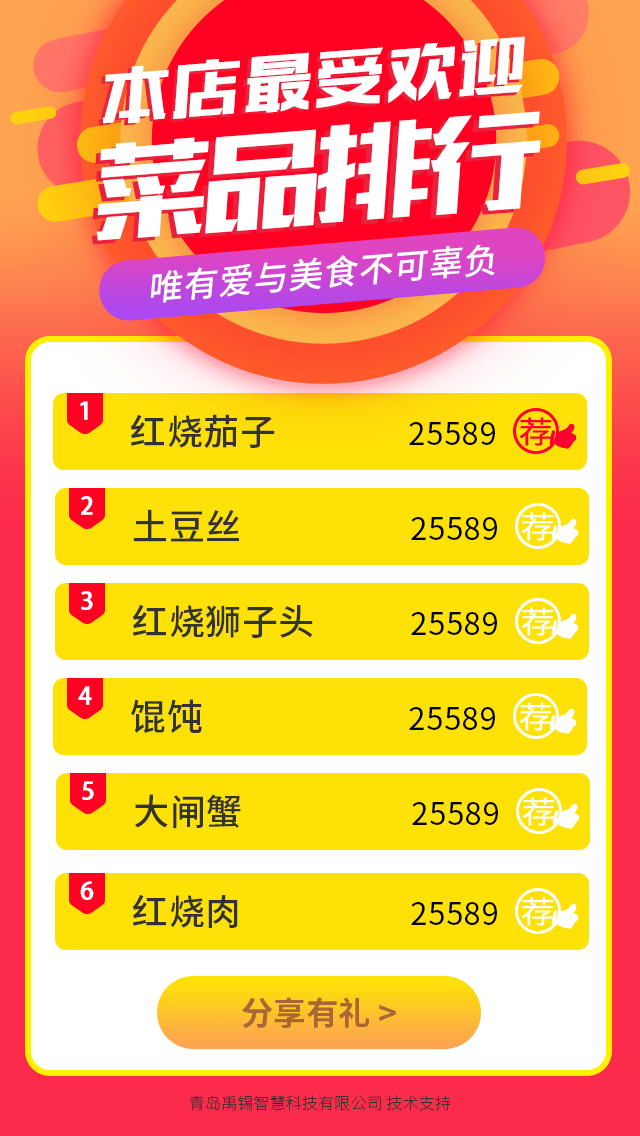
<style>
.page{position:relative;width:640px;height:1136px;background:#fee207}
.page>*{position:absolute;margin:0}
.t1{font:75.8px "MFBanHei_Noncommercial-Regular";letter-spacing:0.12em;font-style:italic;scale:0.85 1}
.t2{font:75.8px "MFBanHei_Noncommercial-Regular";letter-spacing:0.12em;color:#ffffff;font-style:italic;scale:0.85 1}
.t3{font:130.1px "MFBanHei_Noncommercial-Regular";letter-spacing:0.01em;color:#ffffff;font-style:italic;scale:0.85 1}
.t4{font:130.1px "MFBanHei_Noncommercial-Regular";letter-spacing:0.01em;font-style:italic;scale:0.85 1}
.t5{font:34.5px "SourceHanSansCN-Medium";letter-spacing:0.02em;color:#ffffff;font-style:italic}
.t6{font:23.8px "AdobeHeitiStd-Regular";color:#ffffff;font-weight:bold}
.t7{font:36px "SourceHanSansCN-Medium";letter-spacing:0.01em;color:#333333}
.t8{font:31px "SourceHanSansCN-Regular";letter-spacing:0.02em;color:#000000}
.t9{font:30.4px "SourceHanSansCN-Regular";letter-spacing:0.1em;color:#ff0033;scale:1.13 1}
.t10{font:30.4px "SourceHanSansCN-Regular";letter-spacing:0.1em;color:#ffffff;scale:1.13 1}
.t11{font:32.4px "SourceHanSansCN-Bold";color:#aa6736;text-transform:uppercase}
.t12{font:16px "SourceHanSansCN-ExtraLight";letter-spacing:0.01em;color:#333333}
</style>
<div class="page">
<p class="t1" style="left:98px;top:39px;width:424px;height:87px;rotate:-4deg">本店最受欢迎</p>
<p class="t2" style="left:102px;top:36px;width:423px;height:88px;rotate:-4deg">本店最受欢迎</p>
<p class="t3" style="left:96px;top:111px;width:445px;height:130px;rotate:-4deg">菜品排行</p>
<p class="t4" style="left:91px;top:115px;width:444px;height:130px;rotate:-4deg">菜品排行</p>
<p class="t5" style="left:150px;top:244px;width:345px;height:59px;rotate:-5deg">唯有爱与美食不可辜负</p>
<p class="t6" style="left:80px;top:401px;width:8px;height:19px">1</p>
<p class="t7" style="left:130px;top:414px;width:145px;height:34px">红烧茄子</p>
<p class="t8" style="left:409px;top:422px;width:86px;height:23px">25589</p>
<p class="t9" style="left:519px;top:417px;width:33px;height:29px">荐</p>
<p class="t6" style="left:81px;top:496px;width:12px;height:19px">2</p>
<p class="t7" style="left:133px;top:509px;width:106px;height:33px">土豆丝</p>
<p class="t8" style="left:411px;top:517px;width:86px;height:23px">25589</p>
<p class="t10" style="left:521px;top:512px;width:33px;height:29px">荐</p>
<p class="t6" style="left:81px;top:591px;width:12px;height:19px">3</p>
<p class="t7" style="left:132px;top:604px;width:181px;height:34px">红烧狮子头</p>
<p class="t8" style="left:411px;top:612px;width:86px;height:23px">25589</p>
<p class="t10" style="left:521px;top:607px;width:33px;height:29px">荐</p>
<p class="t6" style="left:78px;top:686px;width:14px;height:19px">4</p>
<p class="t7" style="left:131px;top:699px;width:71px;height:34px">馄饨</p>
<p class="t10" style="left:519px;top:702px;width:33px;height:29px">荐</p>
<p class="t8" style="left:409px;top:707px;width:86px;height:23px">25589</p>
<p class="t6" style="left:82px;top:781px;width:12px;height:19px">5</p>
<p class="t7" style="left:135px;top:794px;width:106px;height:35px">大闸蟹</p>
<p class="t10" style="left:522px;top:797px;width:33px;height:29px">荐</p>
<p class="t8" style="left:412px;top:802px;width:86px;height:23px">25589</p>
<p class="t6" style="left:80px;top:881px;width:14px;height:19px">6</p>
<p class="t7" style="left:132px;top:894px;width:106px;height:34px">红烧肉</p>
<p class="t8" style="left:411px;top:902px;width:86px;height:23px">25589</p>
<p class="t10" style="left:521px;top:897px;width:33px;height:29px">荐</p>
<p class="t11" style="left:242px;top:997px;width:154px;height:32px">分享有礼 &gt;</p>
<p class="t12" style="left:189px;top:1095px;width:262px;height:16px">青岛禹锡智慧科技有限公司 技术支持</p>
</div>
